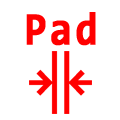
<style>
.page{position:relative;width:120px;height:120px;background:#ffffff}
.page>*{position:absolute;margin:0}
.t1{font:46.6px "Consolas-Bold";letter-spacing:0.05em;color:#ff0000;font-weight:bold;scale:0.86 1}
</style>
<div class="page">
<p class="t1" style="left:26px;top:12px;width:70px;height:34px">Pad</p>
</div>
